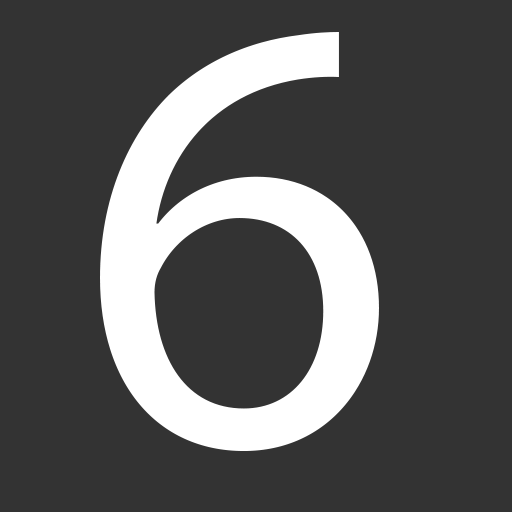
<style>
.page{position:relative;width:512px;height:512px;background:#333333}
.page>*{position:absolute;margin:0}
.t1{font:625px "MyriadPro-Regular";color:#ffffff}
</style>
<div class="page">
<p class="t1" style="left:100px;top:32px;width:279px;height:419px">6</p>
</div>
